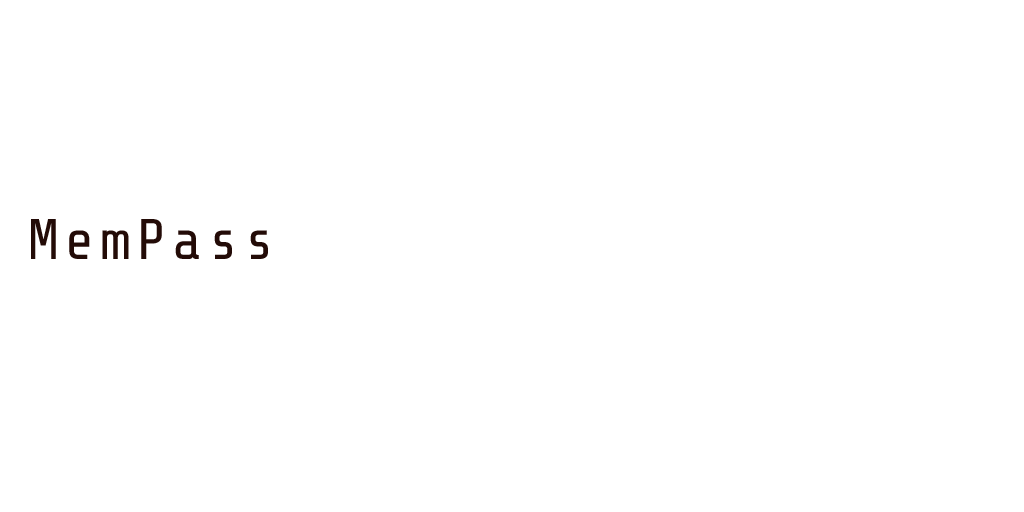
<style>
.page{position:relative;width:1024px;height:512px;background:#ffffff}
.page>*{position:absolute;margin:0}
.t1{font:57px "Share-TechMono";letter-spacing:0.09em;color:#230b07}
</style>
<div class="page">
<p class="t1" style="left:31px;top:219px;width:237px;height:40px">MemPass</p>
</div>
